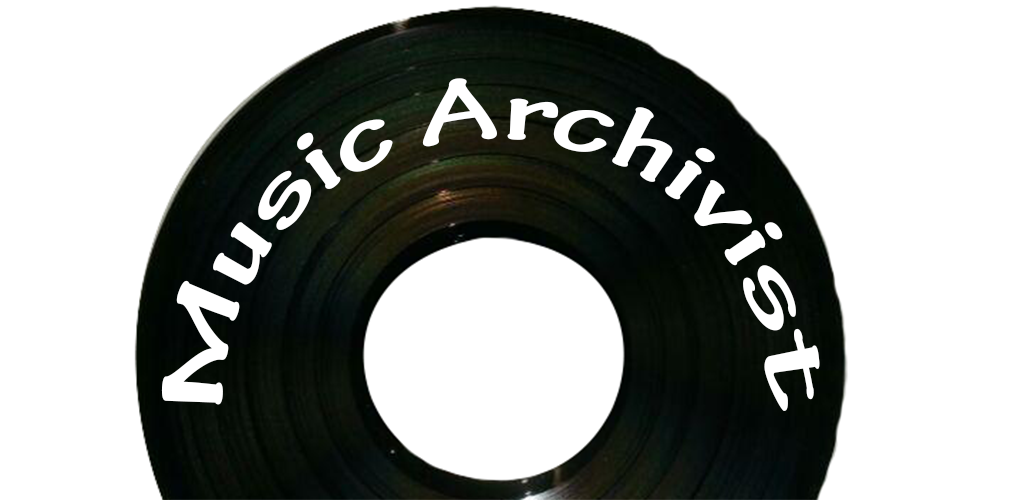
<style>
.page{position:relative;width:1024px;height:500px;background:#ffffff}
.page>*{position:absolute;margin:0}
.t1{font:95px "TektonPro-BoldCond";color:#ffffff}
</style>
<div class="page">
<p class="t1" style="left:161px;top:78px;width:659px;height:333px">Music Archivist</p>
</div>
